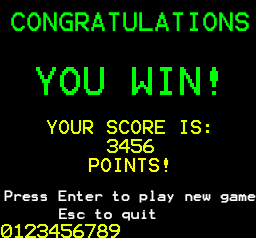
<style>
.page{position:relative;width:256px;height:238px;background:#000000}
.page>*{position:absolute;margin:0}
.t1{font:12px "Terminal";color:#ffffff}
.t2{font:21.3px "Terminal";color:#00ff06}
.t3{font:32px "Terminal";color:#00ff06}
.t4{font:16px "Terminal";color:#e4ff00}
.t5{font:16px "Terminal";color:#fcff00}
.t6{font:12px "Terminal";color:#fefefe}
</style>
<div class="page">
<p class="t1" style="left:4px;top:12px;width:252px;height:191px;text-align:center"><span class="t2">CONGRATULATIONS<br><br></span><span class="t3">YOU WIN!<br><br></span><span class="t4">YOUR SCORE IS:<br>3456<br></span><span class="t5">POINTS!<br></span><br>Press Enter to play new game</p>
<p class="t6" style="left:59px;top:208px;width:97px;height:13px">Esc to quit</p>
<p class="t4" style="left:0px;top:224px;width:121px;height:14px">0123456789</p>
</div>
